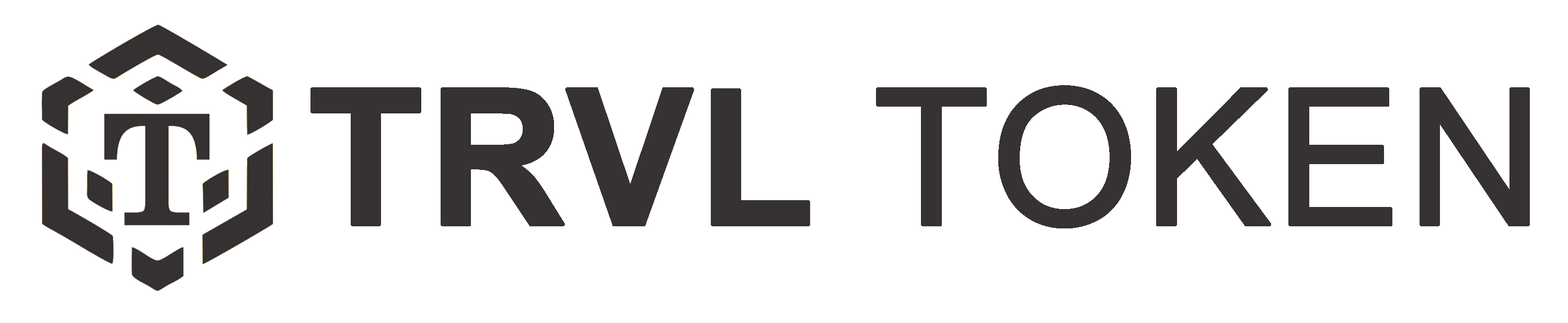
<style>
.page{position:relative;width:1568px;height:323px;background:#ffffff}
.page>*{position:absolute;margin:0}
.t1{font:189.5px "ArialMT";color:#363132;font-weight:bold}
.t2{font:189.5px "Arial-BoldMT";color:#363132;font-weight:bold}
</style>
<div class="page">
<p class="t1" style="left:310px;top:85px;width:1220px;height:143px"><span class="t2">TRVL </span>TOKEN</p>
</div>
